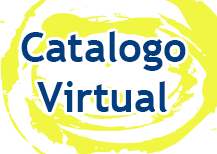
<style>
.page{position:relative;width:217px;height:154px;background:#ffffff}
.page>*{position:absolute;margin:0}
.t1{font:41.7px "TrebuchetMS-Bold";color:#013e7f}
</style>
<div class="page">
<p class="t1" style="left:21px;top:31px;width:165px;height:81px;text-align:center">Catalogo<br>Virtual</p>
</div>
